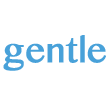
<style>
.page{position:relative;width:111px;height:104px;background:#ffffff}
.page>*{position:absolute;margin:0}
.t1{font:30px "BanglaMN";color:#48a1d9;font-weight:bold}
</style>
<div class="page">
<p class="t1" style="left:3px;top:35px;width:103px;height:36px">gentle</p>
</div>
